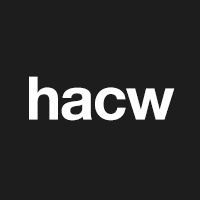
<style>
.page{position:relative;width:200px;height:200px;background:#1d1d1d}
.page>*{position:absolute;margin:0}
.t1{font:60px "HelveticaNeue-Bold";letter-spacing:-0.025em;color:#ffffff}
</style>
<div class="page">
<p class="t1" style="left:29px;top:76px;width:146px;height:45px">hacw</p>
</div>
